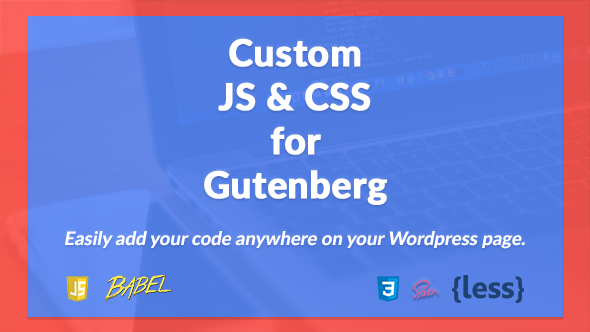
<style>
.page{position:relative;width:590px;height:332px}
.page>*{position:absolute;margin:0}
.t1{font:36.9px "Lato-Heavy";color:#ffffff;font-weight:bold}
.t2{font:18.4px "Lato-Heavy";color:#ffffff;font-style:italic}
</style>
<div class="page">
<p class="t1" style="left:204px;top:38px;width:183px;height:167px;text-align:center">Custom<br>JS &amp; CSS<br>for<br>Gutenberg</p>
<p class="t2" style="left:65px;top:231px;width:460px;height:18px">Easily add your code anywhere on your Wordpress page.</p>
</div>
